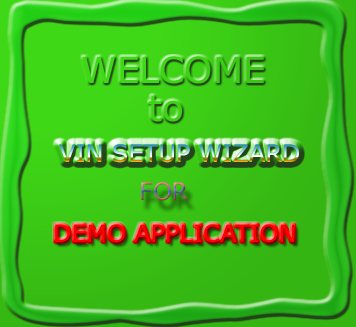
<style>
.page{position:relative;width:356px;height:327px}
.page>*{position:absolute;margin:0}
.t1{font:24px "Verdana"}
.t2{font:24px "Verdana";color:#ff0000}
</style>
<div class="page">
<p class="t1" style="left:59px;top:144px;width:240px;height:19px">VIN SETUP WIZARD</p>
<p class="t1" style="left:141px;top:182px;width:48px;height:19px">FOR</p>
<p class="t2" style="left:55px;top:224px;width:240px;height:19px">DEMO APPLICATION</p>
</div>
